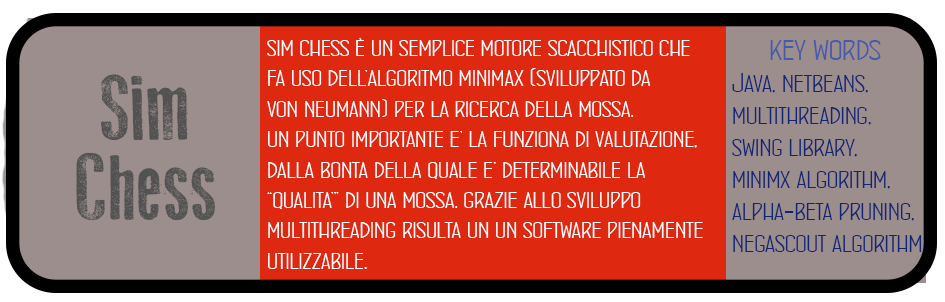
<style>
.page{position:relative;width:945px;height:302px;background:#de2910}
.page>*{position:absolute;margin:0}
.t1{font:25.3px "ConcursoItalianBTNWide";color:#ffffff}
.t2{font:26.7px "ConcursoItalianBTNWide";color:#112672}
.t3{font:32px "ConcursoItalianBTNWide";color:#455baa}
.t4{font:93.3px "OldPress";color:#525252}
.t5{font:80px "ConcursoItalianBTNWide";color:#525252}
</style>
<div class="page">
<p class="t1" style="left:267px;top:38px;width:436px;height:231px">sim chess è un semplice motore scacchistico che <br>fa uso dell’algoritmo minimax (sviluppato da<br>von neumann) per la ricerca della mossa. <br>un punto importante e’ la funziona di valutazione,<br>dalla bonta della quale e’ determinabile la <br>“qualita’” di una mossa. grazie allo sviluppo <br>multithreading risulta un un software pienamente<br>utilizzabile.</p>
<p class="t2" style="left:732px;top:40px;width:190px;height:212px"><span class="t3">     key words<br></span>Java, netbeans, <br>multithreading, <br>swing library, <br>minimx algorithm, <br>alpha-beta pruning,<br>negascout algorithm</p>
<p class="t4" style="left:101px;top:74px;width:88px;height:67px"><span class="t5"> </span>Sim</p>
<p class="t4" style="left:76px;top:152px;width:139px;height:69px">Chess</p>
</div>
